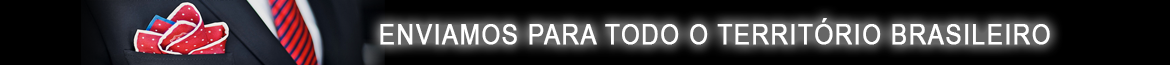
<style>
.page{position:relative;width:1170px;height:65px;background:#000000}
.page>*{position:absolute;margin:0}
.t1{font:28px "ArialMT";letter-spacing:0.05em;color:#ffffff;font-weight:bold;scale:0.85 1}
</style>
<div class="page">
<p class="t1" style="left:380px;top:18px;width:670px;height:27px">EN VIAMOS PARA TODO O TERRITÓRIO BRASILEIRO</p>
</div>
